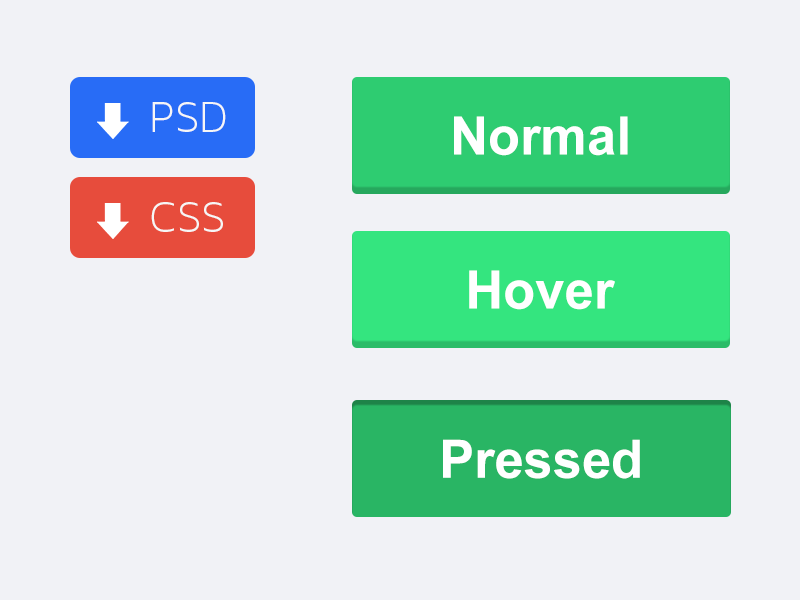
<style>
.page{position:relative;width:800px;height:600px;background:#f1f2f6}
.page>*{position:absolute;margin:0}
.t1{font:46.2px "MavenProLight300-Regular";color:#f6f6f6}
.t2{font:52.9px "Arial-BoldMT";color:#ffffff}
</style>
<div class="page">
<p class="t1" style="left:152px;top:102px;width:74px;height:30px">PSD</p>
<p class="t2" style="left:454px;top:116px;width:174px;height:40px">Normal</p>
<p class="t1" style="left:151px;top:202px;width:72px;height:30px">CSS</p>
<p class="t2" style="left:469px;top:270px;width:146px;height:40px">Hover</p>
<p class="t2" style="left:443px;top:439px;width:197px;height:40px">Pressed</p>
</div>
